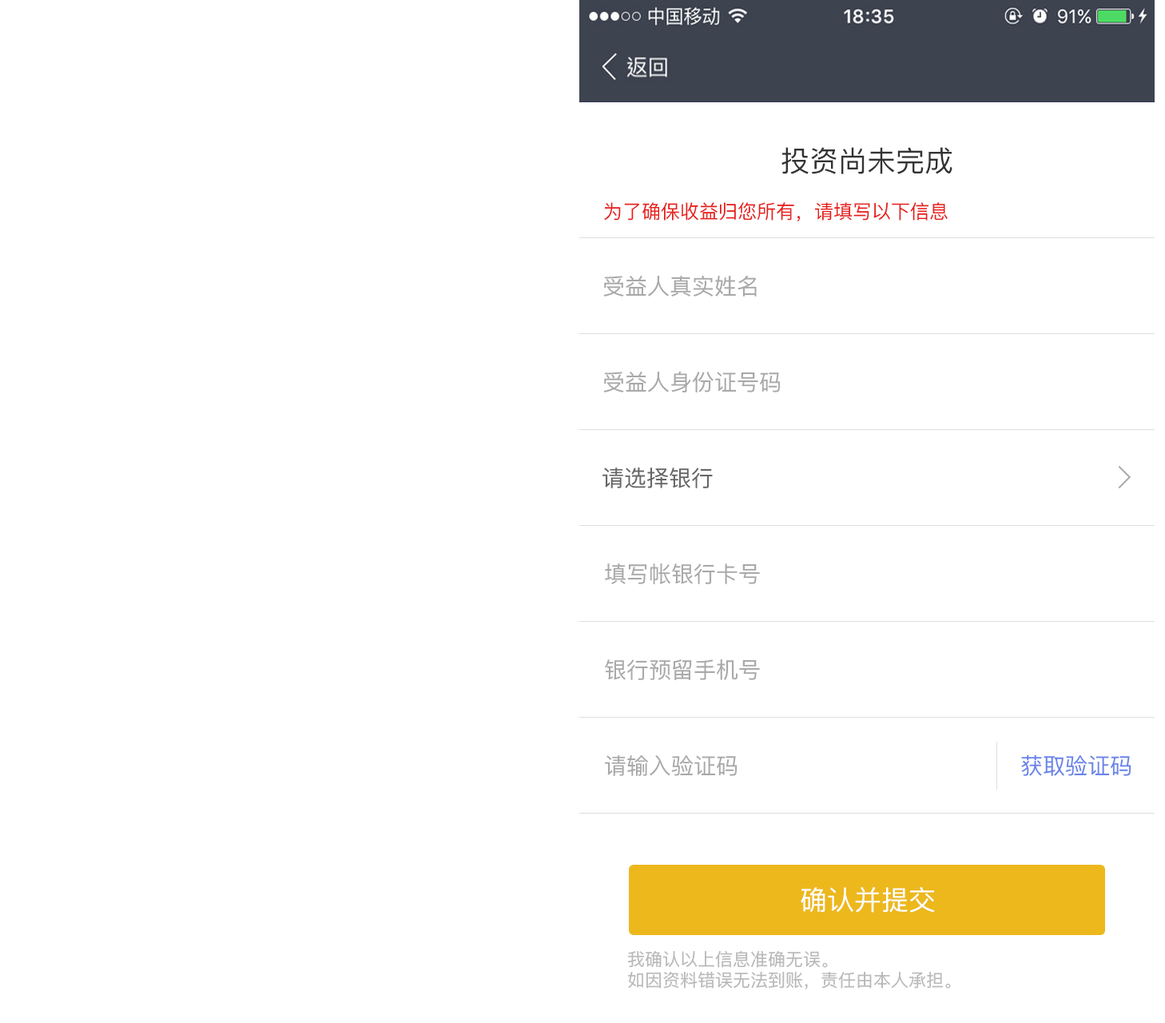
<style>
.page{position:relative;width:1165px;height:1023px;background:#ffffff}
.page>*{position:absolute;margin:0}
.t1{font:28.8px "PingFangSC-Regular";color:#333333;text-transform:uppercase}
.t2{font:19.2px "PingFangSC-Regular";color:#e71c18;text-transform:uppercase}
.t3{font:22.4px "PingFangSC-Regular";color:#a9a9a9;text-transform:uppercase}
.t4{font:22.4px "PingFangSC-Regular";color:#666666;text-transform:uppercase}
.t5{font:22.4px "PingFangSC-Regular";color:#6a84ea;text-transform:uppercase}
.t6{font:27.2px "PingFangSC-Regular";color:#ffffff;text-transform:uppercase}
.t7{font:17.6px "PingFangSC-Regular";color:#bababa;text-transform:uppercase}
</style>
<div class="page">
<p class="t1" style="left:782px;top:147px;width:171px;height:27px">投资尚未完成</p>
<p class="t2" style="left:604px;top:202px;width:344px;height:19px">为了确保收益归您所有，请填写以下信息</p>
<p class="t3" style="left:604px;top:276px;width:153px;height:21px">受益人真实姓名</p>
<p class="t3" style="left:604px;top:371px;width:177px;height:21px">受益人身份证号码</p>
<p class="t4" style="left:603px;top:467px;width:110px;height:21px">请选择银行</p>
<p class="t3" style="left:605px;top:564px;width:155px;height:20px">填写帐银行卡号</p>
<p class="t3" style="left:605px;top:659px;width:155px;height:21px">银行预留手机号</p>
<p class="t3" style="left:605px;top:755px;width:133px;height:21px">请输入验证码</p>
<p class="t5" style="left:1022px;top:755px;width:110px;height:21px">获取验证码</p>
<p class="t6" style="left:801px;top:886px;width:134px;height:27px">确认并提交</p>
<p class="t7" style="left:628px;top:950px;width:323px;height:40px">我确认以上信息准确无误。<br>如因资料错误无法到账，责任由本人承担。</p>
</div>
